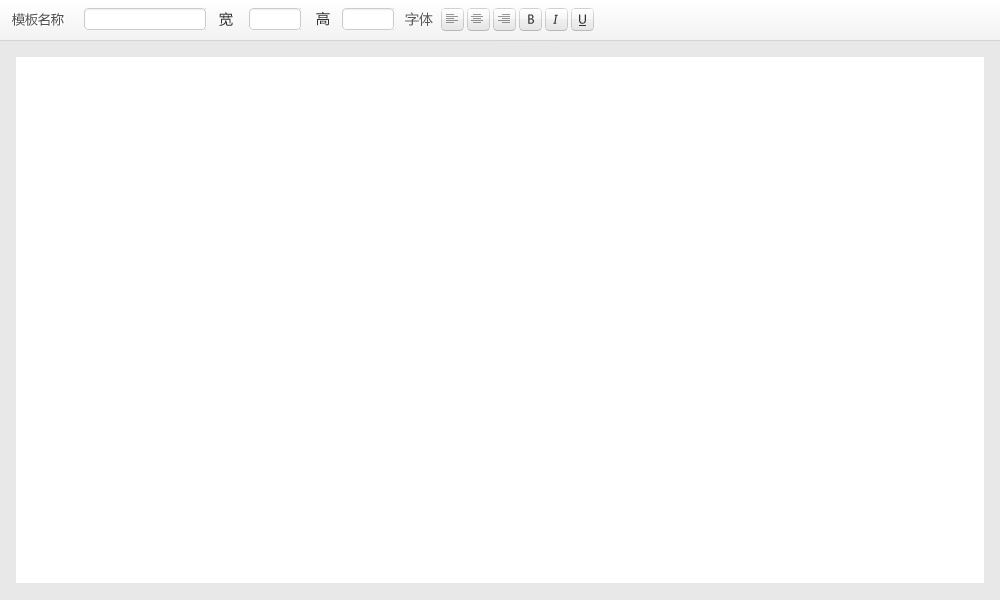
<style>
.page{position:relative;width:1000px;height:600px;background:#ffffff}
.page>*{position:absolute;margin:0}
.t1{font:13px "MicrosoftYaHei";color:#515151}
.t2{font:14px "MicrosoftYaHei";color:#333333}
.t3{font:14px "MicrosoftYaHei";color:#5a5a5a}
.t4{font:12px "MicrosoftYaHei";color:#333333}
.t5{font:12px "MicrosoftYaHei";color:#333333;font-style:italic}
</style>
<div class="page">
<p class="t1" style="left:12px;top:13px;width:52px;height:13px">模板名称</p>
<p class="t2" style="left:219px;top:12px;width:14px;height:14px">宽</p>
<p class="t2" style="left:316px;top:11px;width:14px;height:15px">高</p>
<p class="t3" style="left:405px;top:12px;width:28px;height:14px">字体</p>
<p class="t4" style="left:528px;top:14px;width:6px;height:10px">B</p>
<p class="t5" style="left:553px;top:14px;width:5px;height:10px">I</p>
<p class="t4" style="left:579px;top:14px;width:7px;height:10px">U</p>
</div>
